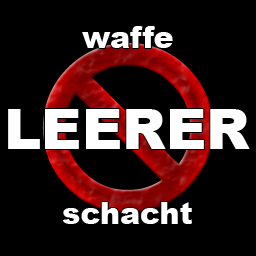
<style>
.page{position:relative;width:256px;height:256px;background:#000000}
.page>*{position:absolute;margin:0}
.t1{font:30px "Arial-Black";color:#ffffff}
.t2{font:56px "Arial-Black";color:#ffffff}
</style>
<div class="page">
<p class="t1" style="left:82px;top:26px;width:91px;height:22px">waffe</p>
<p class="t2" style="left:8px;top:109px;width:242px;height:40px">LEERER</p>
<p class="t1" style="left:62px;top:202px;width:130px;height:22px">schacht</p>
</div>
